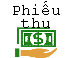
<style>
.page{position:relative;width:71px;height:58px;background:#ffffff}
.page>*{position:absolute;margin:0}
.t1{font:12px/13.3px "CourierNewPSMT";color:#000000}
</style>
<div class="page">
<p class="t1" style="left:13px;top:1px;width:47px;height:27px;text-align:center">Phiếu<br>thu</p>
</div>
